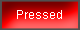
<style>
.page{position:relative;width:80px;height:30px}
.page>*{position:absolute;margin:0}
.t1{font:12px "ArialMT";color:#ffffff}
</style>
<div class="page">
<p class="t1" style="left:17px;top:10px;width:45px;height:9px">Pressed</p>
</div>
